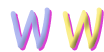
<style>
.page{position:relative;width:104px;height:52px;background:#ffffff}
.page>*{position:absolute;margin:0}
.t1{font:60px "kindergarten";color:#aab3ef;font-weight:bold}
.t2{font:60px "kindergarten";font-weight:bold}
</style>
<div class="page">
<p class="t1" style="left:10px;top:7px;width:40px;height:42px">W</p>
<p class="t2" style="left:62px;top:7px;width:40px;height:42px">W</p>
</div>
